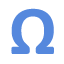
<style>
.page{position:relative;width:64px;height:64px;background:#ffffff}
.page>*{position:absolute;margin:0}
.t1{font:70.1px "Calibri-Bold";color:#5588dd}
</style>
<div class="page">
<p class="t1" style="left:11px;top:8px;width:43px;height:46px">Ω</p>
</div>
